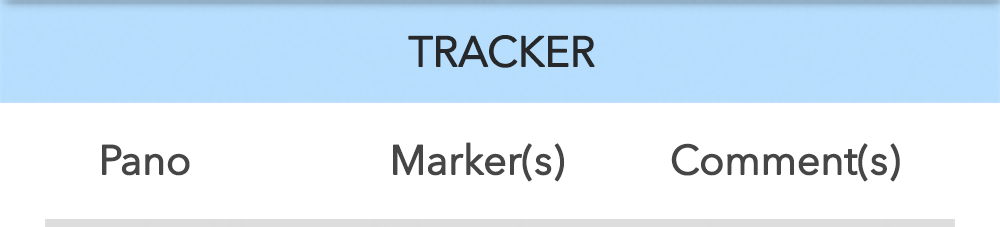
<style>
.page{position:relative;width:1000px;height:227px;background:#ffffff}
.page>*{position:absolute;margin:0}
.t1{font:42.4px "AvenirNextLTPro-Regular";letter-spacing:-0.025em;color:#272829;font-weight:bold}
.t2{font:41px "AvenirNextLTPro-Regular";letter-spacing:-0.025em;color:#464646;font-weight:bold}
</style>
<div class="page">
<p class="t1" style="left:408px;top:35px;width:187px;height:33px">TRACKER</p>
<p class="t2" style="left:102px;top:144px;width:88px;height:32px">Pano</p>
<p class="t2" style="left:393px;top:142px;width:172px;height:40px">Marker(s)</p>
<p class="t2" style="left:671px;top:143px;width:229px;height:39px">Comment(s)</p>
</div>
